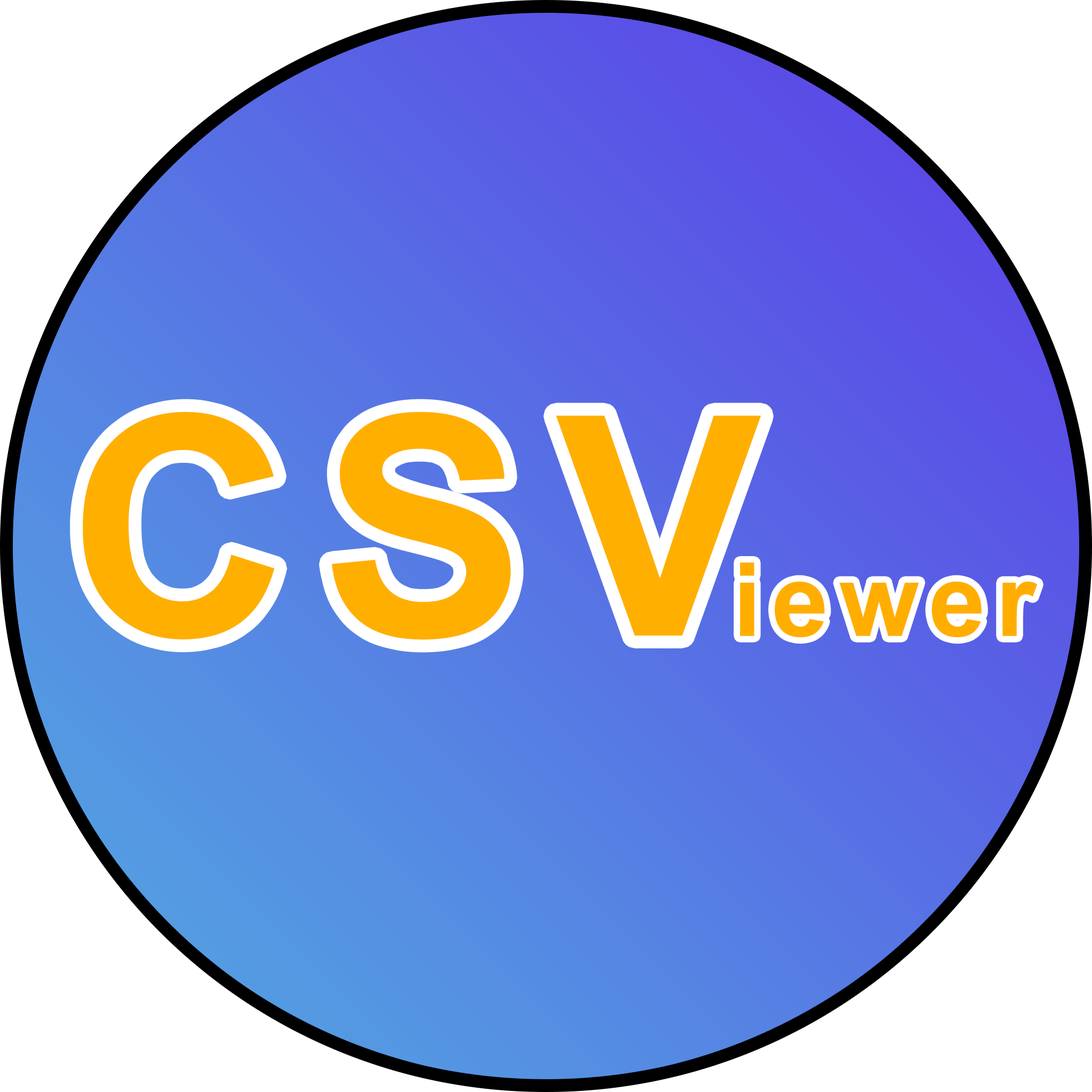
<style>
.page{position:relative;width:1092px;height:1092px;background:#ffffff}
.page>*{position:absolute;margin:0}
.t1{font:307.1px "Arial-BoldMT";letter-spacing:0.1em;color:#ffaf00}
.t2{font:102.4px "Arial-BoldMT";letter-spacing:0.1em;color:#ffae00}
</style>
<div class="page">
<p class="t1" style="left:83px;top:412px;width:678px;height:228px">CSV</p>
<p class="t2" style="left:740px;top:563px;width:297px;height:75px">iewer</p>
</div>
